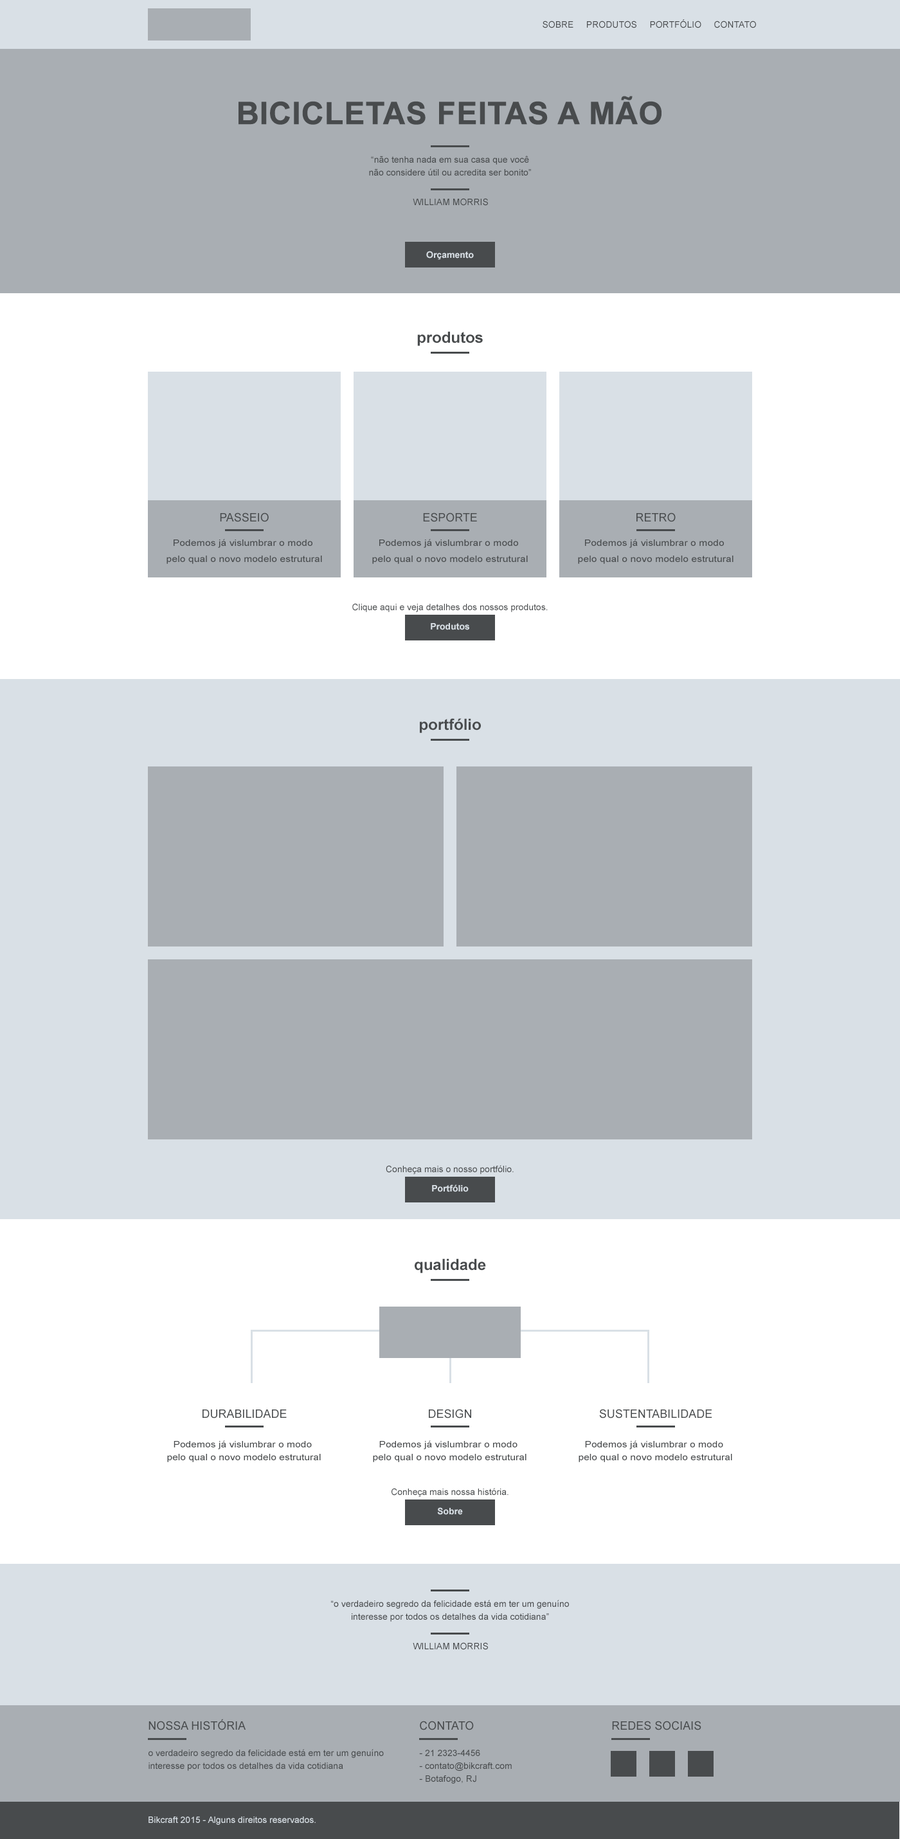
<style>
.page{position:relative;width:900px;height:1839px;background:#ffffff}
.page>*{position:absolute;margin:0}
.t1{font:9px "ArialMT";color:#484b4d;text-transform:uppercase}
.t2{font:30.9px "Arial-BoldMT";color:#484b4d;text-transform:uppercase;font-weight:bold}
.t3{font:9px/12.9px "ArialMT";color:#484b4d}
.t4{font:9px "Arial-BoldMT";color:#d9e0e6}
.t5{font:15.4px "Arial-BoldMT";color:#484b4d}
.t6{font:11.6px "ArialMT";color:#484b4d;text-transform:uppercase}
.t7{font:9px/16.1px "ArialMT";color:#484b4d;scale:1.13 1}
.t8{font:9px "ArialMT";color:#484b4d}
.t9{font:9px/12.9px "ArialMT";color:#484b4d;scale:1.12 1}
.t10{font:9px "ArialMT";color:#d9e0e6}
</style>
<div class="page">
<p class="t1" style="left:543px;top:19px;width:213px;height:9px">Sobre     Produtos     PORTFÓLIO     Contato</p>
<p class="t2" style="left:239px;top:96px;width:423px;height:29px">Bicicletas feitas a mão</p>
<p class="t3" style="left:369px;top:156px;width:162px;height:20px;text-align:center">“não tenha nada em sua casa que você<br>não considere útil ou acredita ser bonito”</p>
<p class="t1" style="left:413px;top:198px;width:75px;height:8px">WILLIAM MORRIS</p>
<p class="t4" style="left:426px;top:251px;width:48px;height:9px">Orçamento</p>
<p class="t5" style="left:417px;top:331px;width:66px;height:15px">produtos</p>
<p class="t6" style="left:220px;top:512px;width:49px;height:10px">passeio</p>
<p class="t6" style="left:423px;top:512px;width:54px;height:10px">esporte</p>
<p class="t6" style="left:636px;top:512px;width:40px;height:10px">retro</p>
<p class="t7" style="left:166px;top:539px;width:156px;height:25px;text-align:center">Podemos já vislumbrar o modo <br>pelo qual o novo modelo estrutural</p>
<p class="t7" style="left:372px;top:539px;width:156px;height:25px;text-align:center">Podemos já vislumbrar o modo <br>pelo qual o novo modelo estrutural</p>
<p class="t7" style="left:578px;top:539px;width:156px;height:25px;text-align:center">Podemos já vislumbrar o modo <br>pelo qual o novo modelo estrutural</p>
<p class="t8" style="left:352px;top:603px;width:196px;height:9px">Clique aqui e veja detalhes dos nossos produtos.</p>
<p class="t4" style="left:431px;top:623px;width:38px;height:7px">Produtos</p>
<p class="t5" style="left:420px;top:718px;width:61px;height:15px">portfólio</p>
<p class="t8" style="left:386px;top:1165px;width:128px;height:9px">Conheça mais o nosso portfólio.</p>
<p class="t4" style="left:432px;top:1184px;width:37px;height:8px">Portfólio</p>
<p class="t5" style="left:415px;top:1258px;width:71px;height:15px">qualidade</p>
<p class="t6" style="left:203px;top:1409px;width:84px;height:9px">durabilidade</p>
<p class="t6" style="left:429px;top:1408px;width:42px;height:10px">DESIGN</p>
<p class="t6" style="left:599px;top:1408px;width:113px;height:10px">SUSTENTABILIDADE</p>
<p class="t9" style="left:167px;top:1440px;width:154px;height:22px;text-align:center">Podemos já vislumbrar o modo <br>pelo qual o novo modelo estrutural</p>
<p class="t9" style="left:373px;top:1440px;width:153px;height:22px;text-align:center">Podemos já vislumbrar o modo <br>pelo qual o novo modelo estrutural</p>
<p class="t9" style="left:579px;top:1440px;width:153px;height:22px;text-align:center">Podemos já vislumbrar o modo <br>pelo qual o novo modelo estrutural</p>
<p class="t8" style="left:392px;top:1488px;width:117px;height:9px">Conheça mais nossa história.</p>
<p class="t4" style="left:437px;top:1507px;width:26px;height:8px">Sobre</p>
<p class="t3" style="left:331px;top:1599px;width:238px;height:22px;text-align:center">“o verdadeiro segredo da felicidade está em ter um genuíno<br>interesse por todos os detalhes da vida cotidiana”</p>
<p class="t1" style="left:413px;top:1642px;width:75px;height:8px">WILLIAM MORRIS</p>
<p class="t6" style="left:148px;top:1718px;width:98px;height:12px">Nossa história</p>
<p class="t6" style="left:420px;top:1720px;width:54px;height:10px">contato</p>
<p class="t6" style="left:612px;top:1720px;width:89px;height:10px">redes sociais</p>
<p class="t3" style="left:148px;top:1749px;width:236px;height:21px">o verdadeiro segredo da felicidade está em ter um genuíno interesse por todos os detalhes da vida cotidiana</p>
<p class="t3" style="left:419px;top:1749px;width:93px;height:34px">- 21 2323-4456<br>- contato@bikcraft.com<br>- Botafogo, RJ</p>
<p class="t10" style="left:148px;top:1816px;width:168px;height:8px">Bikcraft 2015 - Alguns direitos reservados.</p>
</div>
